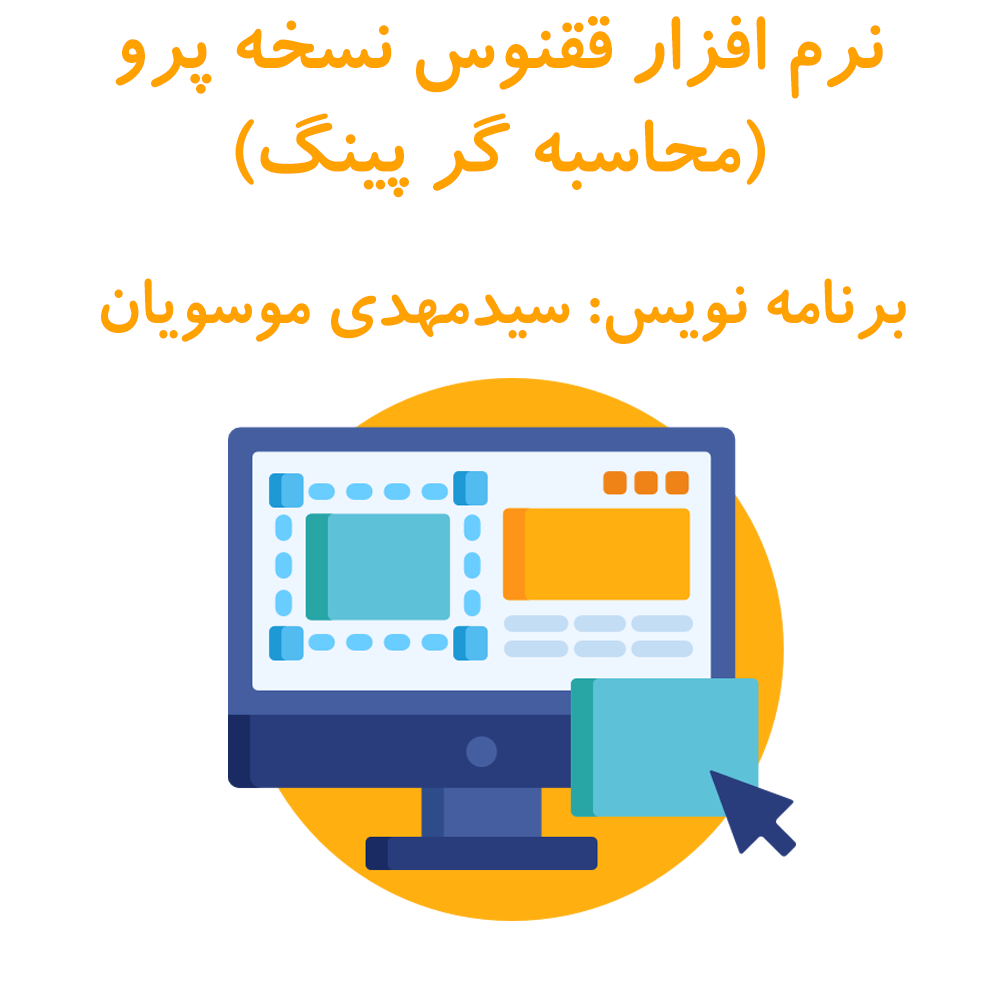
<style>
.page{position:relative;width:1000px;height:1000px;background:#ffffff}
.page>*{position:absolute;margin:0}
.t1{font:86.3px "2--KoodakBold";color:#ffa200}
.t2{font:74px "2--KoodakBold";color:#ffa200}
</style>
<div class="page">
<p class="t1" style="left:115px;top:15px;width:768px;height:183px;text-align:center">نرم افزار ققنوس نسخه پرو<br>(محاسبه گر پینگ)</p>
<p class="t2" style="left:101px;top:278px;width:805px;height:66px">برنامه نویس: سیدمهدی موسویان</p>
</div>
